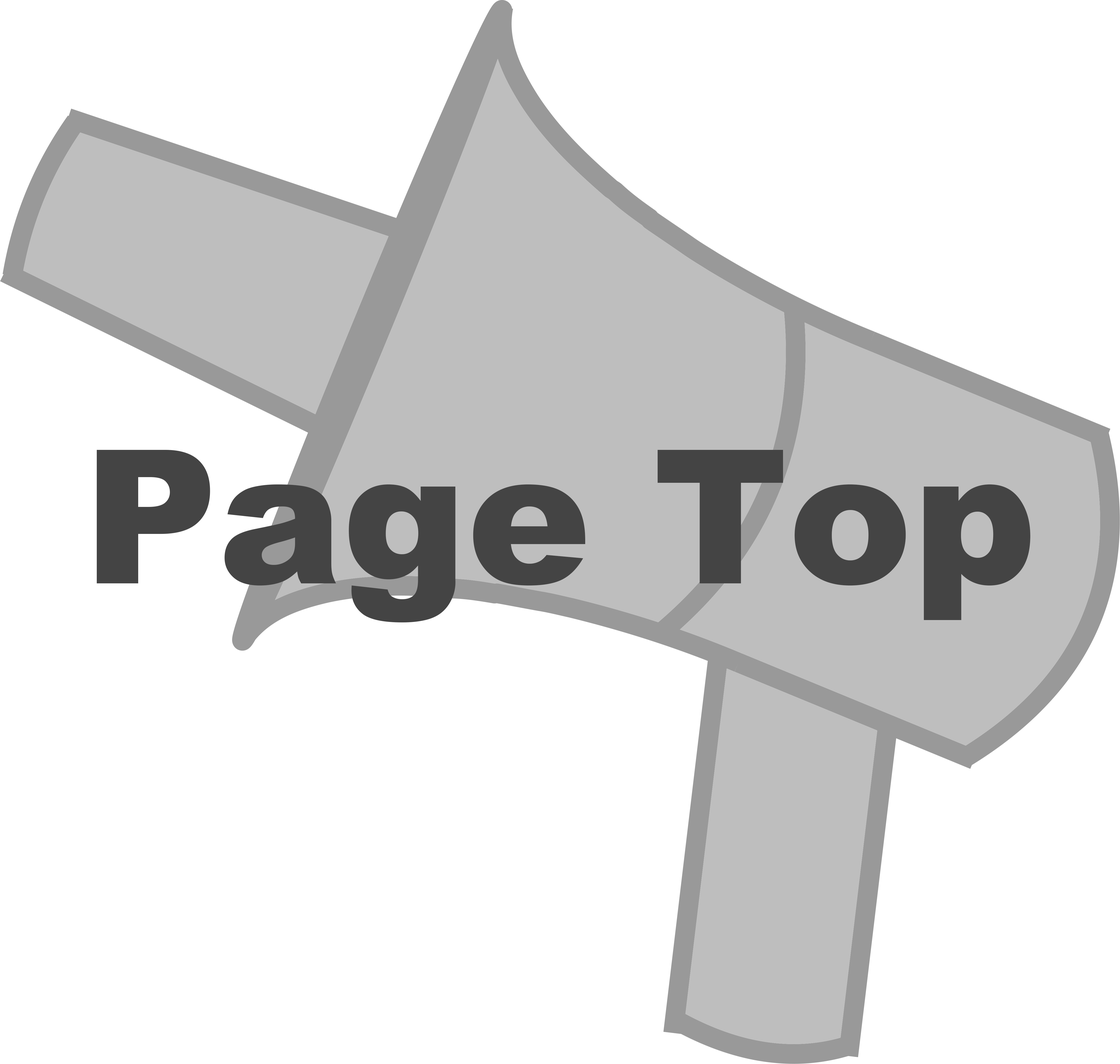
<style>
.page{position:relative;width:1120px;height:1064px;background:#ffffff}
.page>*{position:absolute;margin:0}
.t1{font:186.6px "Arial-Black";color:#444444}
</style>
<div class="page">
<p class="t1" style="left:97px;top:450px;width:934px;height:173px">Page Top</p>
</div>
